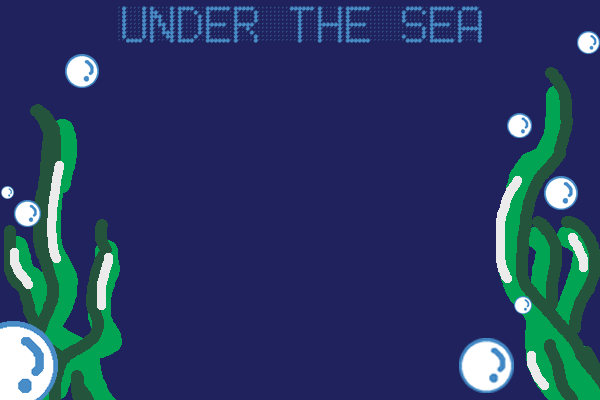
<style>
.page{position:relative;width:600px;height:400px;background:#1f225c}
.page>*{position:absolute;margin:0}
.t1{font:36px "LED-BOARD-REVERSED";color:#488dc8}
</style>
<div class="page">
<p class="t1" style="left:118px;top:6px;width:364px;height:37px">UNDER THE SEA</p>
</div>
